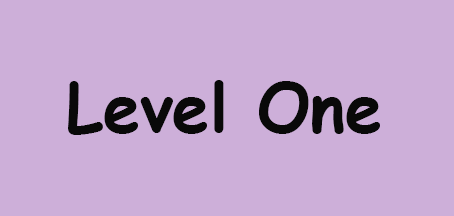
<style>
.page{position:relative;width:454px;height:216px;background:#cdafd9}
.page>*{position:absolute;margin:0}
.t1{font:66.7px "ComicSansMS-Bold";color:#090909}
</style>
<div class="page">
<p class="t1" style="left:68px;top:80px;width:312px;height:55px">Level One</p>
</div>
